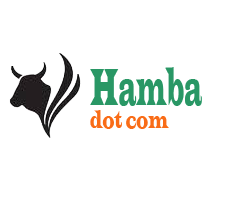
<style>
.page{position:relative;width:250px;height:200px;background:#ffffff}
.page>*{position:absolute;margin:0}
.t1{font:53.6px "LatinWide";color:#299765;scale:0.34 1}
.t2{font:24.5px "LatinWide";color:#f96c17;scale:0.49 1}
</style>
<div class="page">
<p class="t1" style="left:90px;top:67px;width:112px;height:39px">Hamba</p>
<p class="t2" style="left:90px;top:110px;width:79px;height:19px">dot com</p>
</div>
